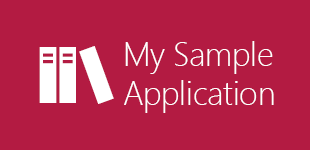
<style>
.page{position:relative;width:310px;height:150px;background:#b31b42}
.page>*{position:absolute;margin:0}
.t1{font:32.5px "SegoeUI-Light";color:#ffffff}
</style>
<div class="page">
<p class="t1" style="left:124px;top:41px;width:150px;height:72px">My Sample<br>Application</p>
</div>
